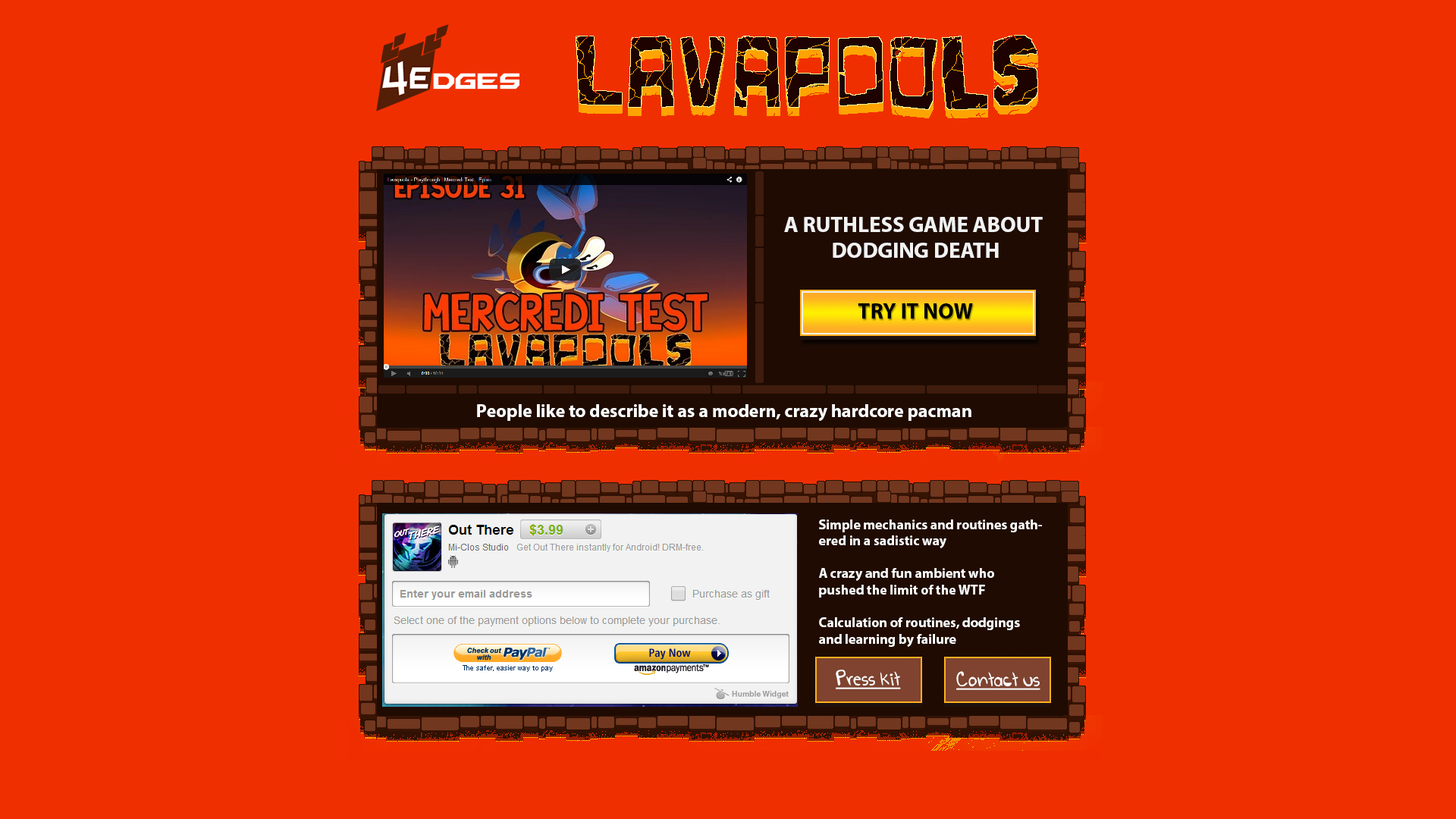
<style>
.page{position:relative;width:1456px;height:819px;background:#f02f01}
.page>*{position:absolute;margin:0}
.t1{font:21.9px "MyriadPro-Bold";color:#f2f2f2}
.t2{font:21.9px "MyriadPro-Bold";color:#000000}
.t3{font:18.2px "MyriadPro-Bold";color:#ffffff}
.t4{font:13.6px "MyriadPro-Bold";color:#ffffff}
.t5{font:19px "GoBoom!";color:#ffffff;text-decoration:underline}
</style>
<div class="page">
<p class="t1" style="left:784px;top:217px;width:259px;height:41px;text-align:center">A RUTHLESS GAME ABOUT <br>DODGING DEATH</p>
<p class="t2" style="left:858px;top:303px;width:115px;height:15px">TRY IT NOW</p>
<p class="t3" style="left:477px;top:404px;width:494px;height:17px">People like to describe it as a modern, crazy hardcore pacman</p>
<p class="t4" style="left:819px;top:519px;width:223px;height:128px">Simple mechanics and routines gathered in a sadistic way<br><br>A crazy and fun ambient who pushed the limit of the WTF<br><br>Calculation of routines, dodgings and learning by failure</p>
<p class="t5" style="left:836px;top:670px;width:65px;height:19px">Press kit</p>
<p class="t5" style="left:956px;top:671px;width:84px;height:19px">Contact us</p>
</div>
